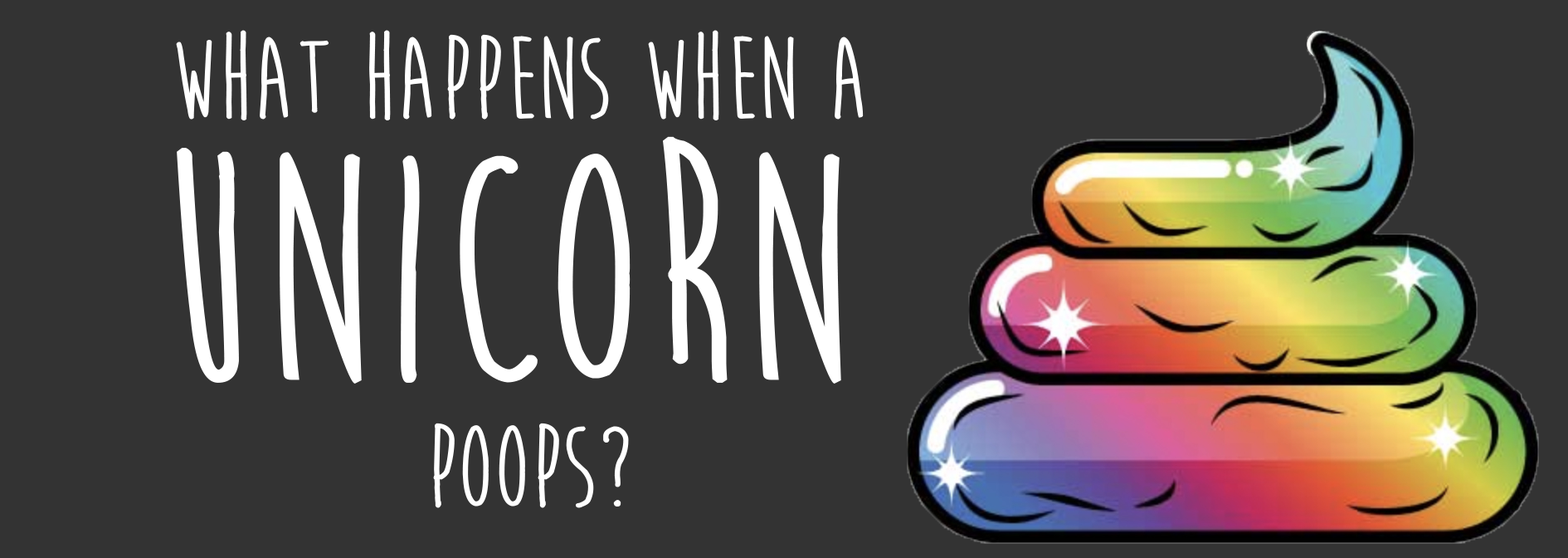
<style>
.page{position:relative;width:1568px;height:558px;background:#333333}
.page>*{position:absolute;margin:0}
.t1{font:119.5px "MoonFlowerBold";color:#ffffff}
.t2{font:331.9px "MoonFlowerBold";color:#ffffff}
</style>
<div class="page">
<p class="t1" style="left:176px;top:30px;width:688px;height:90px">WHAT HAPPENS WHEN A</p>
<p class="t2" style="left:177px;top:136px;width:664px;height:247px">UNICORN</p>
<p class="t1" style="left:433px;top:422px;width:196px;height:86px">POOPS?</p>
</div>
